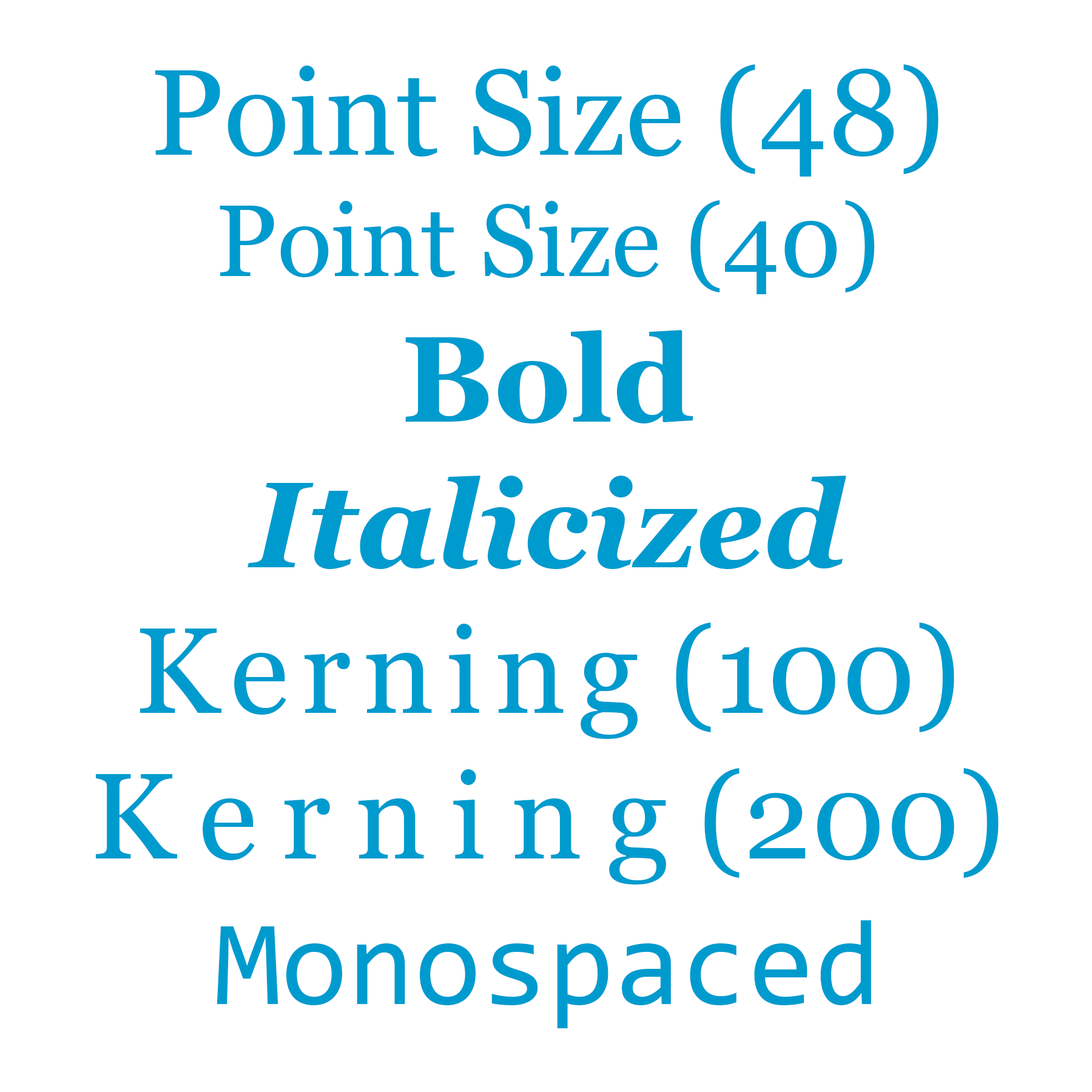
<style>
.page{position:relative;width:1092px;height:1092px;background:#ffffff}
.page>*{position:absolute;margin:0}
.t1{font:121.3px "Georgia";color:#009bce}
.t2{font:101.1px "Georgia";color:#009bce}
.t3{font:121.3px "Georgia-Bold";color:#009bce}
.t4{font:121.3px "Georgia-BoldItalic";color:#009bce}
.t5{font:121.3px "Consolas";color:#009bce}
</style>
<div class="page">
<p class="t1" style="left:95px;top:64px;width:904px;height:964px;text-align:center">Point Size (48)<br><span class="t2">Point Size (40)<br></span><span class="t3">Bold<br></span><span class="t4">Italicized<br></span>Kerning (100)<br>Kerning (200)<br><span class="t5">Monospaced</span></p>
</div>
